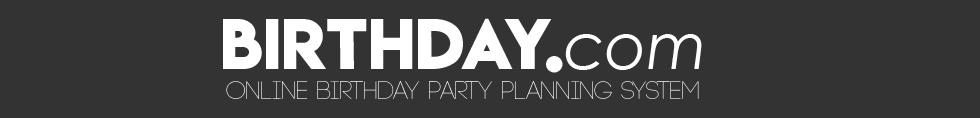
<style>
.page{position:relative;width:980px;height:118px;background:#333333}
.page>*{position:absolute;margin:0}
.t1{font:63.5px "LemonMilkbold";color:#ffffff}
.t2{font:63.5px "CenturyGothic-Italic";color:#ffffff}
.t3{font:25.3px "Code-Light"}
</style>
<div class="page">
<p class="t1" style="left:223px;top:18px;width:479px;height:55px">BIRTHDAY.<span class="t2">com</span></p>
<p class="t3" style="left:226px;top:81px;width:473px;height:18px">online birthday party planning system</p>
</div>
